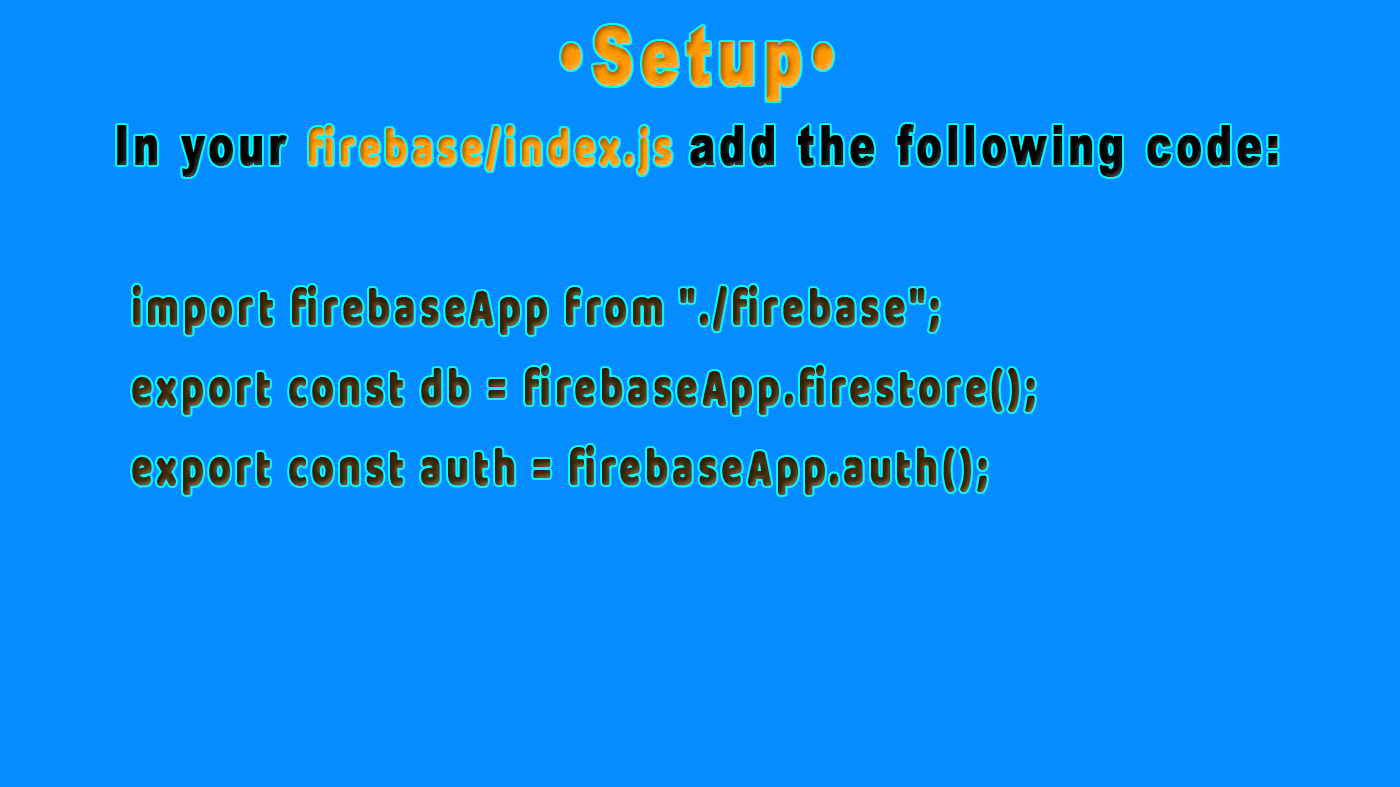
<style>
.page{position:relative;width:1400px;height:787px;background:#058cff}
.page>*{position:absolute;margin:0}
.t1{font:53.8px/80px "Baloo";letter-spacing:0.1em;color:#402b0b;font-weight:bold;scale:0.71 1}
.t2{font:80.6px/80px "Arial-Black";letter-spacing:0.1em;color:#ff9800;font-weight:bold;scale:0.71 1}
.t3{font:53.8px/80px "Arial-Black";letter-spacing:0.1em;color:#000000;font-weight:bold;scale:0.71 1}
.t4{font:53.8px/80px "Baloo";letter-spacing:0.1em;color:#ff9800;font-weight:bold;scale:0.71 1}
</style>
<div class="page">
<p class="t1" style="left:117px;top:25px;width:1161px;height:470px;text-align:center"><span class="t2">•Setup•<br></span><span class="t3">In your </span><span class="t4">firebase/index.js </span><span class="t3">add the following code:<br><br></span>        import firebaseApp from "./firebase";​<br>        export const db = firebaseApp.firestore();​<br>        export const auth = firebaseApp.auth();</p>
</div>
